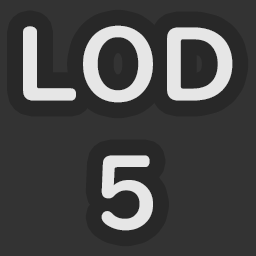
<style>
.page{position:relative;width:256px;height:256px;background:#333333}
.page>*{position:absolute;margin:0}
.t1{font:100px/128px "UDDigiKyokashoNK-B";color:#e6e6e6}
</style>
<div class="page">
<p class="t1" style="left:23px;top:25px;width:210px;height:206px;text-align:center">LOD<br>5</p>
</div>
